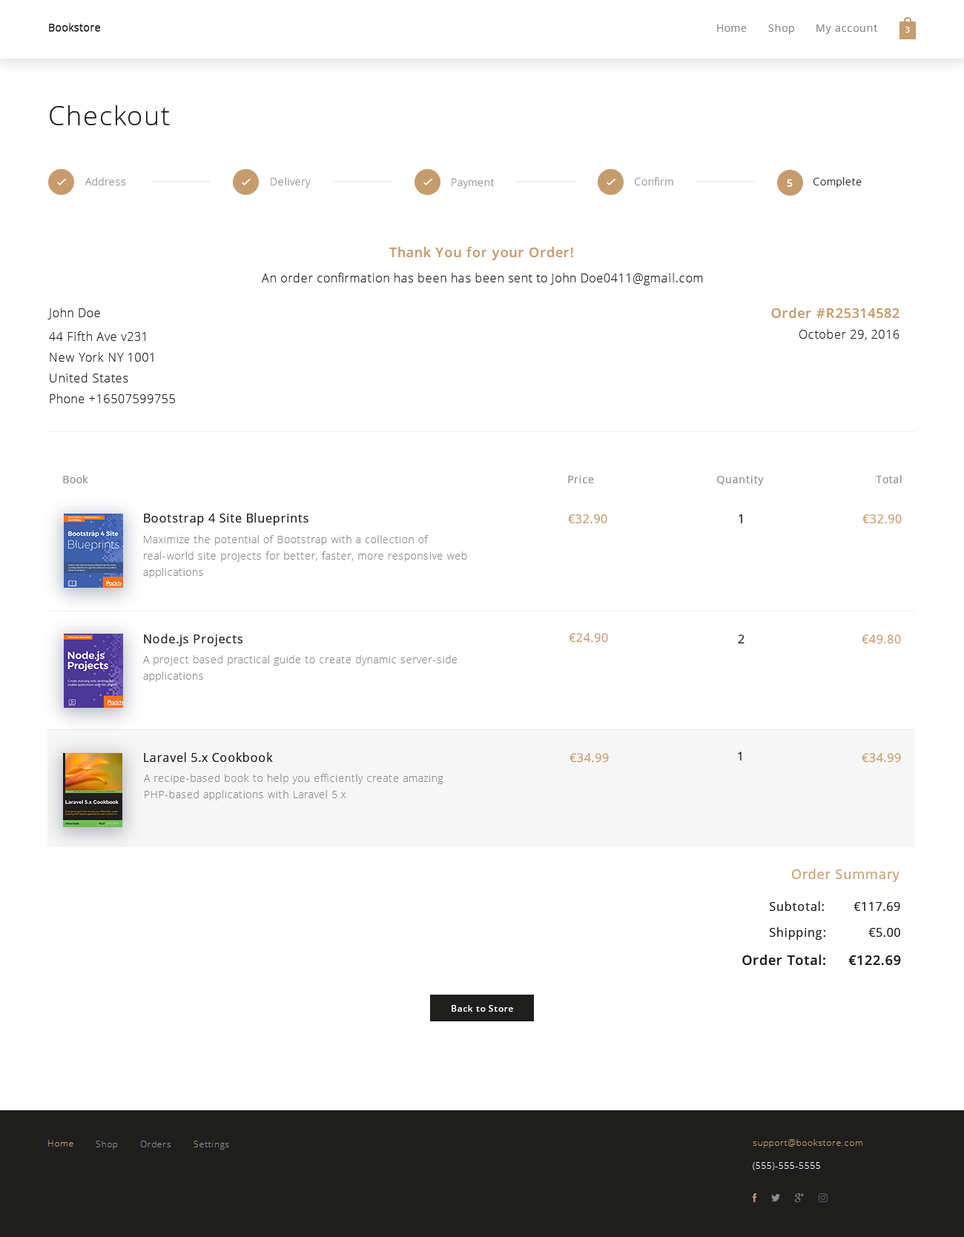
<style>
.page{position:relative;width:964px;height:1237px;background:#ffffff}
.page>*{position:absolute;margin:0}
.t1{font:26.7px "OpenSans-Light";letter-spacing:0.05em;color:#1e1e1c}
.t2{font:10.3px "OpenSans-Light";letter-spacing:0.05em;color:#8c8c8c}
.t3{font:10.4px "OpenSans-Light";letter-spacing:0.05em;color:#8c8c8c}
.t4{font:10.4px "OpenSans-Semibold";letter-spacing:0.05em;color:#ffffff}
.t5{font:10.4px "OpenSans-Light";letter-spacing:0.05em;color:#1e1e1c}
.t6{font:13.3px "OpenSans-Semibold";letter-spacing:0.05em;color:#c69c6d}
.t7{font:11.9px "OpenSans-Light";letter-spacing:0.05em;color:#1e1e1c}
.t8{font:11.9px/20.8px "OpenSans-Light";letter-spacing:0.05em;color:#1e1e1c}
.t9{font:11.9px/23.7px "OpenSans-Light";letter-spacing:0.05em;color:#1e1e1c}
.t10{font:10.4px "OpenSans";letter-spacing:0.05em;color:#8c8c8c}
.t11{font:11.9px "OpenSans";letter-spacing:0.05em;color:#1e1e1c}
.t12{font:11.9px "OpenSans";letter-spacing:0.05em;color:#c69c6d}
.t13{font:10.4px/16.3px "OpenSans-Light";letter-spacing:0.05em;color:#8c8c8c}
.t14{font:11.8px "OpenSans";letter-spacing:0.05em;color:#c69c6d}
.t15{font:13.3px "OpenSans";letter-spacing:0.05em;color:#c69c6d}
.t16{font:13.3px "OpenSans-Semibold";letter-spacing:0.05em;color:#1e1e1c}
.t17{font:8.9px "OpenSans-Semibold";letter-spacing:0.05em;color:#fffefe}
</style>
<div class="page">
<p class="t1" style="left:50px;top:105px;width:120px;height:20px">Checkout</p>
<p class="t2" style="left:85px;top:177px;width:41px;height:9px">Address</p>
<p class="t3" style="left:271px;top:177px;width:40px;height:11px">Delivery</p>
<p class="t3" style="left:451px;top:178px;width:43px;height:11px">Payment</p>
<p class="t3" style="left:635px;top:177px;width:38px;height:9px">Confirm</p>
<p class="t4" style="left:787px;top:179px;width:5px;height:8px">5</p>
<p class="t5" style="left:813px;top:177px;width:48px;height:11px">Complete</p>
<p class="t6" style="left:389px;top:247px;width:184px;height:13px">Thank You for your Order!</p>
<p class="t7" style="left:262px;top:273px;width:441px;height:12px">An order confirmation has been has been sent to John Doe0411@gmail.com</p>
<p class="t8" style="left:47px;top:308px;width:128px;height:95px"><span class="t9">John Doe<br>44 Fifth Ave v231<br></span>New York NY 1001<br>United States<br>Phone +16507599755</p>
<p class="t6" style="left:771px;top:308px;width:128px;height:10px">Order #R25314582</p>
<p class="t7" style="left:799px;top:329px;width:100px;height:11px">October 29, 2016</p>
<p class="t10" style="left:63px;top:475px;width:25px;height:8px">Book</p>
<p class="t10" style="left:568px;top:475px;width:26px;height:8px">Price</p>
<p class="t10" style="left:717px;top:475px;width:47px;height:11px">Quantity</p>
<p class="t10" style="left:876px;top:475px;width:25px;height:8px">Total</p>
<p class="t11" style="left:144px;top:513px;width:164px;height:13px">Bootstrap 4 Site Blueprints</p>
<p class="t12" style="left:568px;top:514px;width:39px;height:9px">€32.90</p>
<p class="t11" style="left:738px;top:514px;width:4px;height:9px">1</p>
<p class="t12" style="left:862px;top:514px;width:39px;height:9px">€32.90</p>
<p class="t13" style="left:143px;top:535px;width:324px;height:43px">Maximize the potential of Bootstrap with a collection of real-world site projects for better, faster, more responsive web applications</p>
<p class="t11" style="left:144px;top:634px;width:98px;height:12px">Node.js Projects</p>
<p class="t14" style="left:569px;top:633px;width:39px;height:10px">€24.90</p>
<p class="t11" style="left:738px;top:635px;width:6px;height:9px">2</p>
<p class="t14" style="left:861px;top:635px;width:40px;height:9px">€49.80</p>
<p class="t13" style="left:143px;top:655px;width:314px;height:27px">A project based practical guide to create dynamic server-side applications</p>
<p class="t11" style="left:144px;top:752px;width:129px;height:10px">Laravel 5.x Cookbook</p>
<p class="t14" style="left:569px;top:753px;width:40px;height:10px">€34.99</p>
<p class="t11" style="left:738px;top:752px;width:3px;height:9px">1</p>
<p class="t14" style="left:861px;top:753px;width:40px;height:10px">€34.99</p>
<p class="t13" style="left:144px;top:774px;width:299px;height:27px">A recipe-based book to help you efficiently create amazing PHP-based applications with Laravel 5.x</p>
<p class="t15" style="left:792px;top:869px;width:107px;height:13px">Order Summary</p>
<p class="t11" style="left:770px;top:901px;width:54px;height:10px">Subtotal:</p>
<p class="t11" style="left:853px;top:902px;width:47px;height:9px">€117.69</p>
<p class="t11" style="left:770px;top:927px;width:55px;height:13px">Shipping:</p>
<p class="t11" style="left:868px;top:928px;width:32px;height:9px">€5.00</p>
<p class="t16" style="left:742px;top:955px;width:83px;height:10px">Order Total:</p>
<p class="t16" style="left:848px;top:956px;width:53px;height:9px">€122.69</p>
<p class="t17" style="left:451px;top:1005px;width:62px;height:7px">Back to Store</p>
</div>
